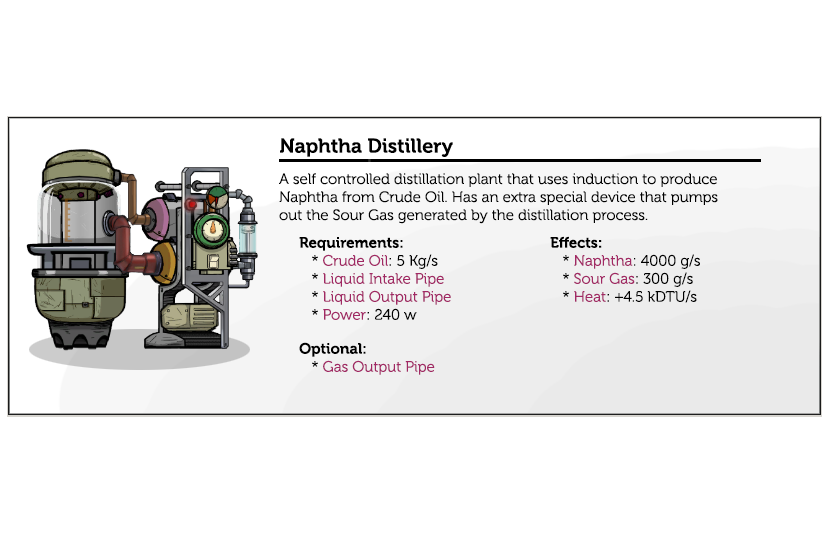
<style>
.page{position:relative;width:830px;height:550px;background:#ffffff}
.page>*{position:absolute;margin:0}
.t1{font:20px "Museo-700";color:#000000}
.t2{font:15px "Museo-300";color:#000000}
.t3{font:15px "Museo-300";color:#a12864}
.t4{font:15px "Museo-700";color:#000000}
</style>
<div class="page">
<p class="t1" style="left:280px;top:138px;width:173px;height:19px">Naphtha Distillery</p>
<p class="t2" style="left:279px;top:173px;width:439px;height:51px">A self controlled distillation plant that uses induction to produce Naphtha from Crude Oil. Has an extra special device that pumps out the Sour Gas generated by the distillation process.</p>
<p class="t3" style="left:299px;top:237px;width:152px;height:83px"><span class="t4">Requirements:</span><span class="t2"><br>   * </span>Crude Oil<span class="t2">: 5 Kg/s<br>   * </span>Liquid Intake Pipe<br><span class="t2">   * </span>Liquid Output Pipe<br><span class="t2">   * </span>Power<span class="t2">: 240 w</span></p>
<p class="t2" style="left:550px;top:236px;width:150px;height:67px"><span class="t4">Effects:</span><br>   * <span class="t3">Naphtha</span>: 4000 g/s                    <br>   * <span class="t3">Sour Gas</span>: 300 g/s<br>   * <span class="t3">Heat</span>: +4.5 kDTU/s</p>
<p class="t3" style="left:299px;top:342px;width:136px;height:33px"><span class="t4">Optional:           <br></span><span class="t2">   * </span>Gas Output Pipe</p>
</div>
